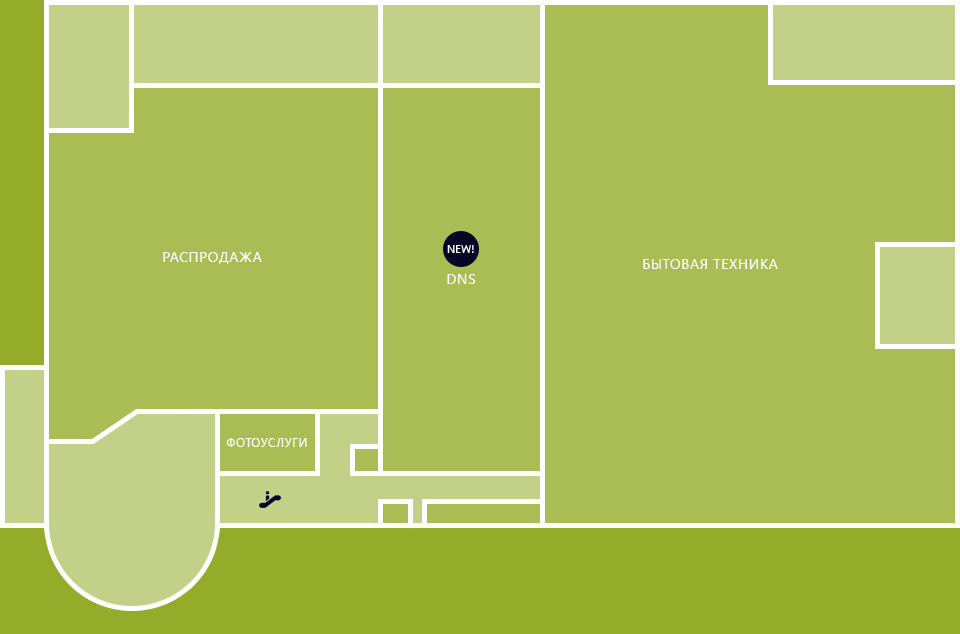
<style>
.page{position:relative;width:960px;height:634px;background:#a9bd54}
.page>*{position:absolute;margin:0}
.t1{font:14px "SegoeUI";letter-spacing:0.05em;color:#ffffff;text-transform:uppercase}
.t2{font:12px "SegoeUI";letter-spacing:0.05em;color:#ffffff;text-transform:uppercase}
</style>
<div class="page">
<p class="t1" style="left:163px;top:252px;width:99px;height:12px">Распродажа</p>
<p class="t1" style="left:643px;top:259px;width:135px;height:10px">Бытовая техника</p>
<p class="t1" style="left:447px;top:274px;width:29px;height:10px">Dns</p>
<p class="t2" style="left:227px;top:438px;width:80px;height:9px">Фотоуслуги</p>
</div>
